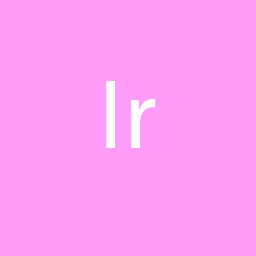
<style>
.page{position:relative;width:256px;height:256px;background:#ff9bf9}
.page>*{position:absolute;margin:0}
.t1{font:100px "MyriadPro-Regular";color:#ffffff}
</style>
<div class="page">
<p class="t1" style="left:106px;top:81px;width:50px;height:67px">Ir</p>
</div>
